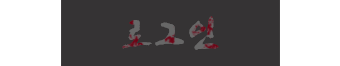
<style>
.page{position:relative;width:340px;height:66px;background:#353334}
.page>*{position:absolute;margin:0}
.t1{font:39.6px "JShinYeongBok-Regular";color:#676767}
</style>
<div class="page">
<p class="t1" style="left:122px;top:16px;width:97px;height:34px">로그인</p>
</div>
